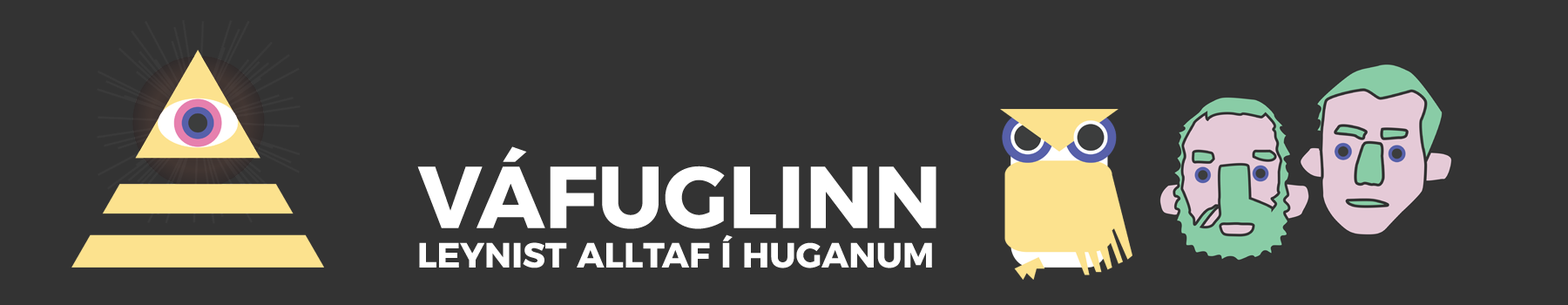
<style>
.page{position:relative;width:1568px;height:305px;background:#333333}
.page>*{position:absolute;margin:0}
.t1{font:87.1px "Montserrat-Bold";color:#ffffff}
.t2{font:34.8px "Montserrat-Bold";color:#ffffff}
</style>
<div class="page">
<p class="t1" style="left:417px;top:146px;width:519px;height:83px">VÁFUGLINN</p>
<p class="t2" style="left:419px;top:234px;width:513px;height:34px">LEYNIST ALLTAF Í HUGANUM</p>
</div>
